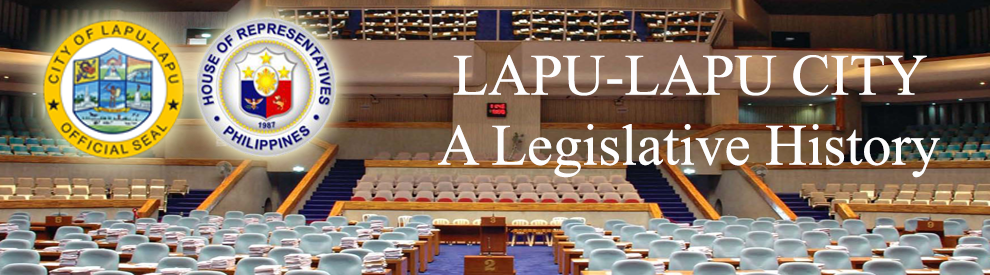
<style>
.page{position:relative;width:990px;height:275px}
.page>*{position:absolute;margin:0}
.t1{font:58.3px "TimesNewRomanPSMT";color:#fdfdfd}
</style>
<div class="page">
<p class="t1" style="left:438px;top:55px;width:502px;height:123px;text-align:center">LAPU-LAPU CITY<br>A Legislative History</p>
</div>
